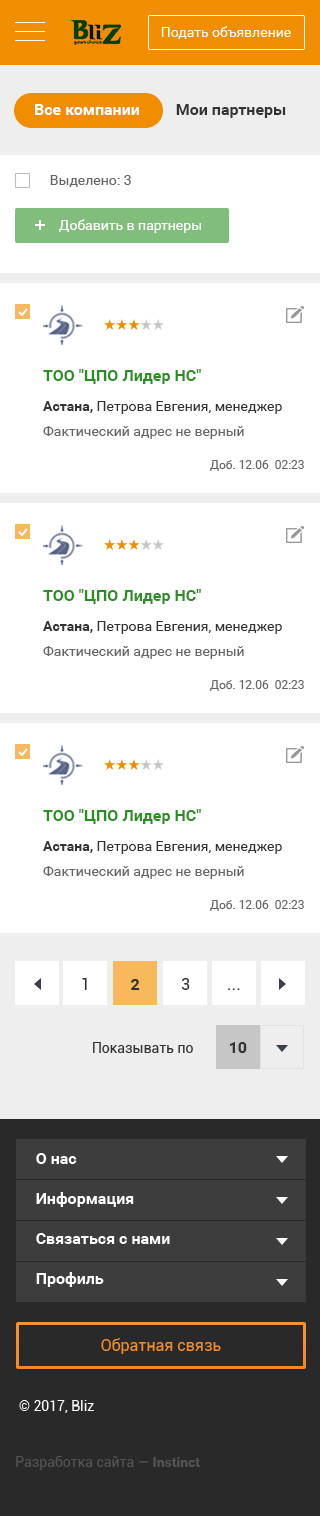
<style>
.page{position:relative;width:320px;height:1516px;background:#ffffff}
.page>*{position:absolute;margin:0}
.t1{font:16px "Roboto-Bold";color:#ffffff}
.t2{font:16px "Roboto-Bold";color:#333333}
.t3{font:14px "Roboto-Regular";color:#666666}
.t4{font:14px "Roboto-Regular";color:#ffffff}
.t5{font:14px/20px "Roboto-Regular";color:#666666}
.t6{font:16px/26px "Roboto-Bold";color:#2a8f22}
.t7{font:14px/20px "Roboto-Bold";color:#333333}
.t8{font:14px/20px "Roboto-Regular";color:#333333}
.t9{font:12px "Roboto-Regular";color:#666666}
</style>
<div class="page">
<p class="t1" style="left:35px;top:104px;width:251px;height:14px">Все компании<span class="t2">         Мои партнеры</span></p>
<p class="t3" style="left:50px;top:175px;width:81px;height:12px">Выделено: 3</p>
<p class="t4" style="left:59px;top:219px;width:142px;height:14px">Добавить в партнеры</p>
<p class="t5" style="left:43px;top:369px;width:239px;height:70px"><span class="t6">ТОО "ЦПО Лидер НС"<br></span><span class="t7">Астана,</span><span class="t8"> Петрова Евгения, менеджер<br></span>Фактический адрес не верный</p>
<p class="t9" style="left:210px;top:460px;width:94px;height:11px">Доб. 12.06  02:23</p>
<p class="t5" style="left:43px;top:589px;width:239px;height:70px"><span class="t6">ТОО "ЦПО Лидер НС"<br></span><span class="t7">Астана,</span><span class="t8"> Петрова Евгения, менеджер<br></span>Фактический адрес не верный</p>
<p class="t9" style="left:210px;top:680px;width:94px;height:11px">Доб. 12.06  02:23</p>
<p class="t5" style="left:43px;top:809px;width:239px;height:70px"><span class="t6">ТОО "ЦПО Лидер НС"<br></span><span class="t7">Астана,</span><span class="t8"> Петрова Евгения, менеджер<br></span>Фактический адрес не верный</p>
<p class="t9" style="left:210px;top:900px;width:94px;height:11px">Доб. 12.06  02:23</p>
</div>
